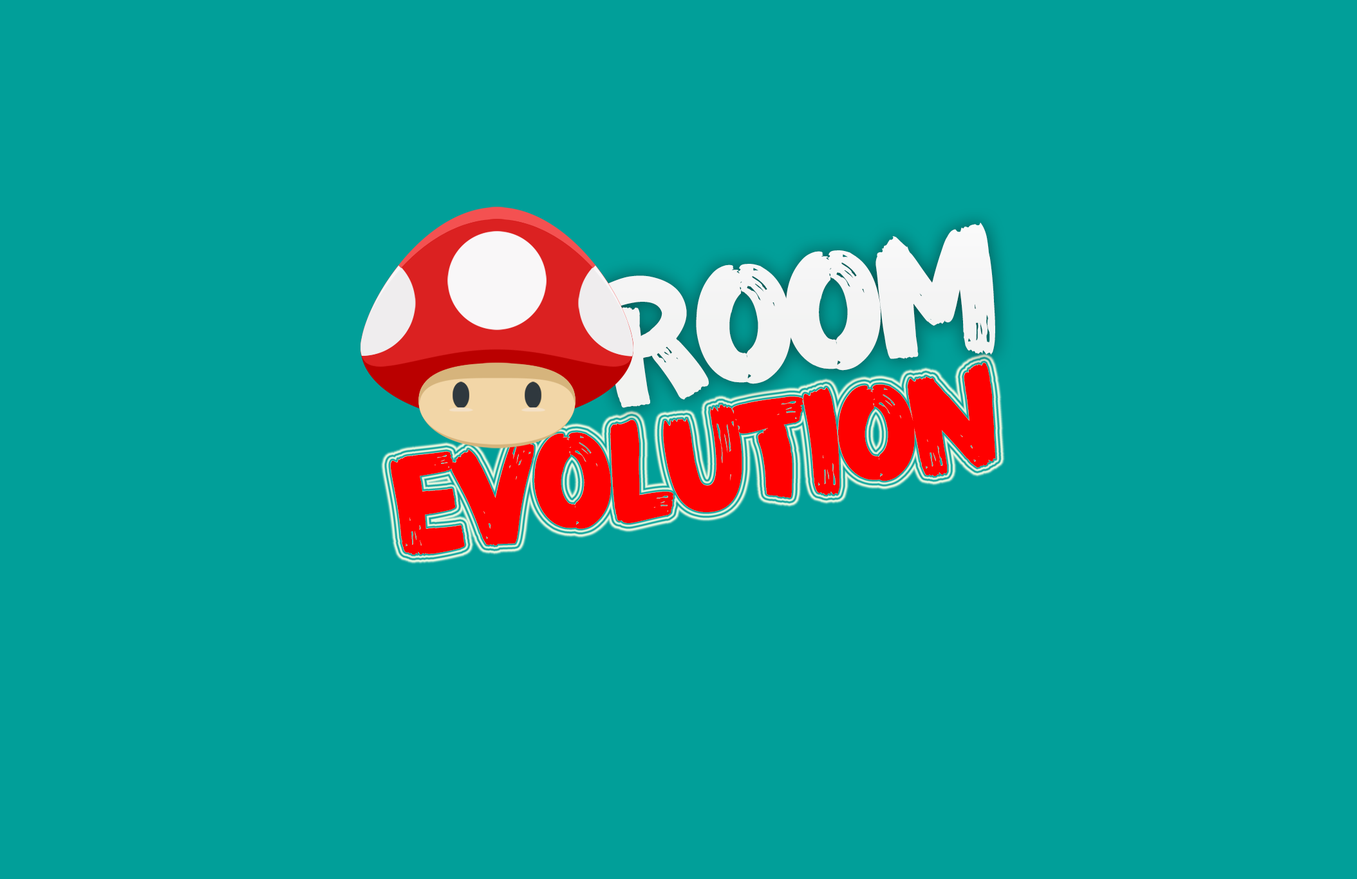
<style>
.page{position:relative;width:1357px;height:879px;background:#019f99}
.page>*{position:absolute;margin:0}
.t1{font:155.1px "FZFENSTXJW--GB1-0";letter-spacing:-0.08em;color:#ffffff}
.t2{font:124.8px "FZFENSTXJW--GB1-0";letter-spacing:-0.08em;color:#ff0000}
</style>
<div class="page">
<p class="t1" style="left:597px;top:223px;width:398px;height:185px;rotate:-9deg">ROOM</p>
<p class="t2" style="left:390px;top:362px;width:606px;height:193px;rotate:-9deg">EVOLUTION</p>
</div>
